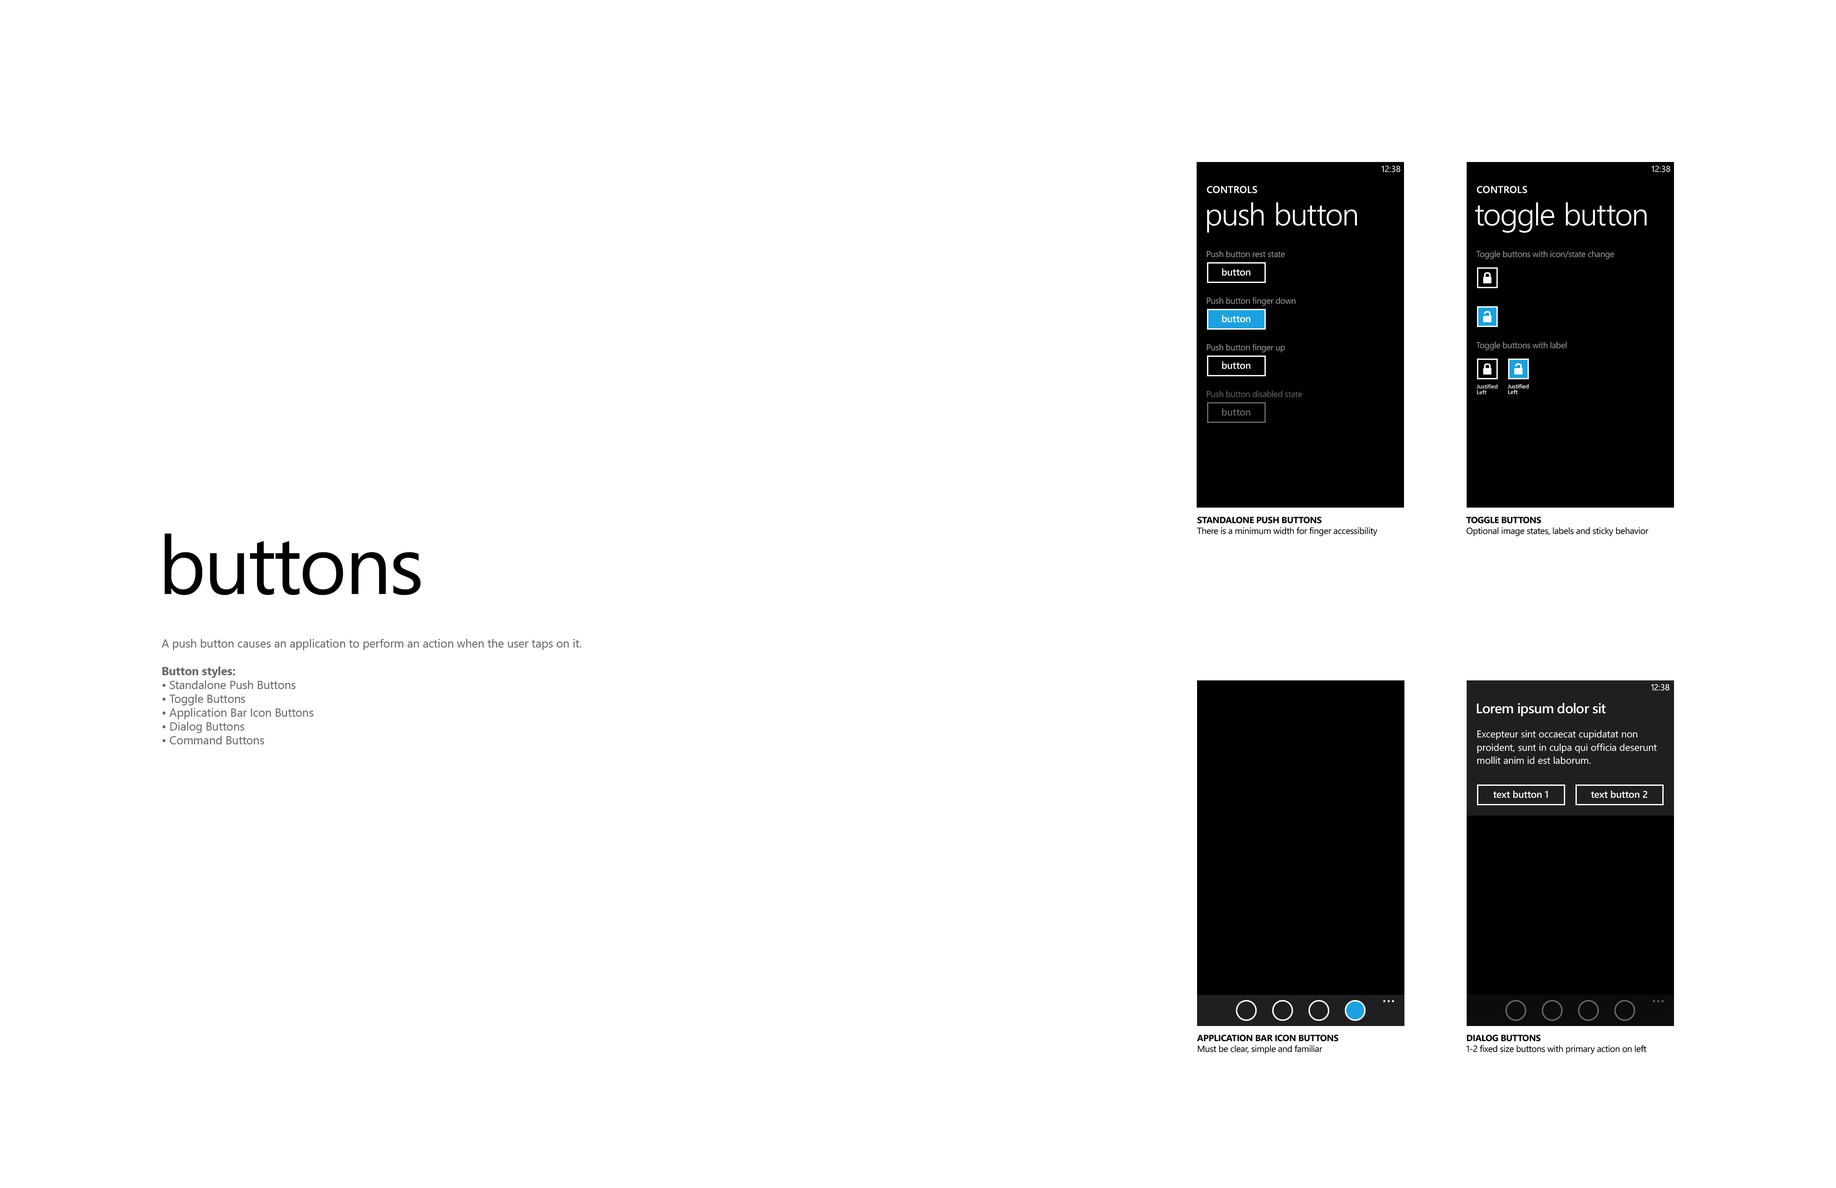
<style>
.page{position:relative;width:1836px;height:1188px;background:#ffffff}
.page>*{position:absolute;margin:0}
.t1{font:8.6px "SegoeWP";color:#ffffff}
.t2{font:9.8px "SegoeWP-Semibold";letter-spacing:0.025em;color:#ffffff;text-transform:uppercase}
.t3{font:31.1px "SegoeWP-SemiLight";letter-spacing:-0.01em;color:#ffffff}
.t4{font:8.6px "SegoeWP";letter-spacing:-0.025em;color:#999999}
.t5{font:9.8px "SegoeWP-Semibold";letter-spacing:-0.01em;color:#ffffff}
.t6{font:5.8px/5.8px "SegoeWP-Semibold";letter-spacing:-0.01em;color:#ffffff}
.t7{font:8.6px "SegoeWP";letter-spacing:-0.025em;color:#666666}
.t8{font:9.8px "SegoeWP-Semibold";letter-spacing:-0.01em;color:#666666}
.t9{font:9px "SegoeWP";letter-spacing:-0.025em;color:#000000}
.t10{font:9px "SegoeWP-Bold";letter-spacing:-0.025em;color:#000000;text-transform:uppercase}
.t11{font:81.8px "SegoeWP";letter-spacing:-0.025em;color:#000000}
.t12{font:11.5px "SegoeUI";color:#666666}
.t13{font:11.5px "SegoeUI-Bold";color:#666666}
.t14{font:8.6px "SegoeWP";letter-spacing:-0.05em;color:#ffffff}
.t15{font:13.8px "SegoeWP-Semibold";letter-spacing:-0.025em;color:#ffffff}
.t16{font:9.8px/13.2px "SegoeWP";color:#ffffff}
</style>
<div class="page">
<p class="t1" style="left:1382px;top:165px;width:19px;height:7px">12:38</p>
<p class="t1" style="left:1652px;top:165px;width:19px;height:7px">12:38</p>
<p class="t2" style="left:1207px;top:186px;width:50px;height:8px">controls</p>
<p class="t2" style="left:1477px;top:186px;width:50px;height:8px">controls</p>
<p class="t3" style="left:1207px;top:202px;width:150px;height:31px">push button</p>
<p class="t3" style="left:1475px;top:202px;width:172px;height:31px">toggle button</p>
<p class="t4" style="left:1207px;top:251px;width:78px;height:6px">Push button rest state</p>
<p class="t4" style="left:1476px;top:251px;width:138px;height:8px">Toggle buttons with icon/state change</p>
<p class="t5" style="left:1222px;top:268px;width:29px;height:8px">button</p>
<p class="t4" style="left:1207px;top:297px;width:89px;height:9px">Push button finger down</p>
<p class="t5" style="left:1222px;top:315px;width:29px;height:7px">button</p>
<p class="t4" style="left:1476px;top:342px;width:91px;height:8px">Toggle buttons with label</p>
<p class="t4" style="left:1207px;top:343px;width:78px;height:10px">Push button finger up</p>
<p class="t5" style="left:1222px;top:362px;width:29px;height:7px">button</p>
<p class="t6" style="left:1477px;top:384px;width:21px;height:10px">Justified Left</p>
<p class="t6" style="left:1508px;top:384px;width:21px;height:10px">Justified Left</p>
<p class="t7" style="left:1207px;top:391px;width:95px;height:6px">Push button disabled state</p>
<p class="t8" style="left:1222px;top:408px;width:29px;height:8px">button</p>
<p class="t9" style="left:1197px;top:517px;width:181px;height:19px"><span class="t10">standalone push buttons<br></span>There is a minimum width for finger accessibility</p>
<p class="t9" style="left:1466px;top:517px;width:183px;height:19px"><span class="t10">toggle buttons<br></span>Optional image states, labels and sticky behavior</p>
<p class="t11" style="left:165px;top:534px;width:256px;height:61px">buttons</p>
<p class="t12" style="left:162px;top:639px;width:419px;height:105px">A push button causes an application to perform an action when the user taps on it.<br><br><span class="t13">Button styles:<br></span>• Standalone Push Buttons<br>• Toggle Buttons<br>• Application Bar Icon Buttons<br>• Dialog Buttons<br>• Command Buttons</p>
<p class="t1" style="left:1651px;top:684px;width:19px;height:7px"><span class="t14">1</span>2:38</p>
<p class="t15" style="left:1477px;top:703px;width:129px;height:14px">Lorem ipsum dolor sit</p>
<p class="t16" style="left:1477px;top:730px;width:180px;height:34px">Excepteur sint occaecat cupidatat non<br>proident, sunt in culpa qui officia deserunt<br>mollit anim id est laborum.</p>
<p class="t5" style="left:1493px;top:791px;width:55px;height:7px">text button 1</p>
<p class="t5" style="left:1591px;top:791px;width:56px;height:7px">text button 2</p>
<p class="t9" style="left:1197px;top:1035px;width:141px;height:19px"><span class="t10">application bar icon buttons<br></span>Must be clear, simple and familiar</p>
<p class="t9" style="left:1466px;top:1035px;width:180px;height:19px"><span class="t10">dialog buttons<br></span>1-2 fixed size buttons with primary action on left</p>
</div>
